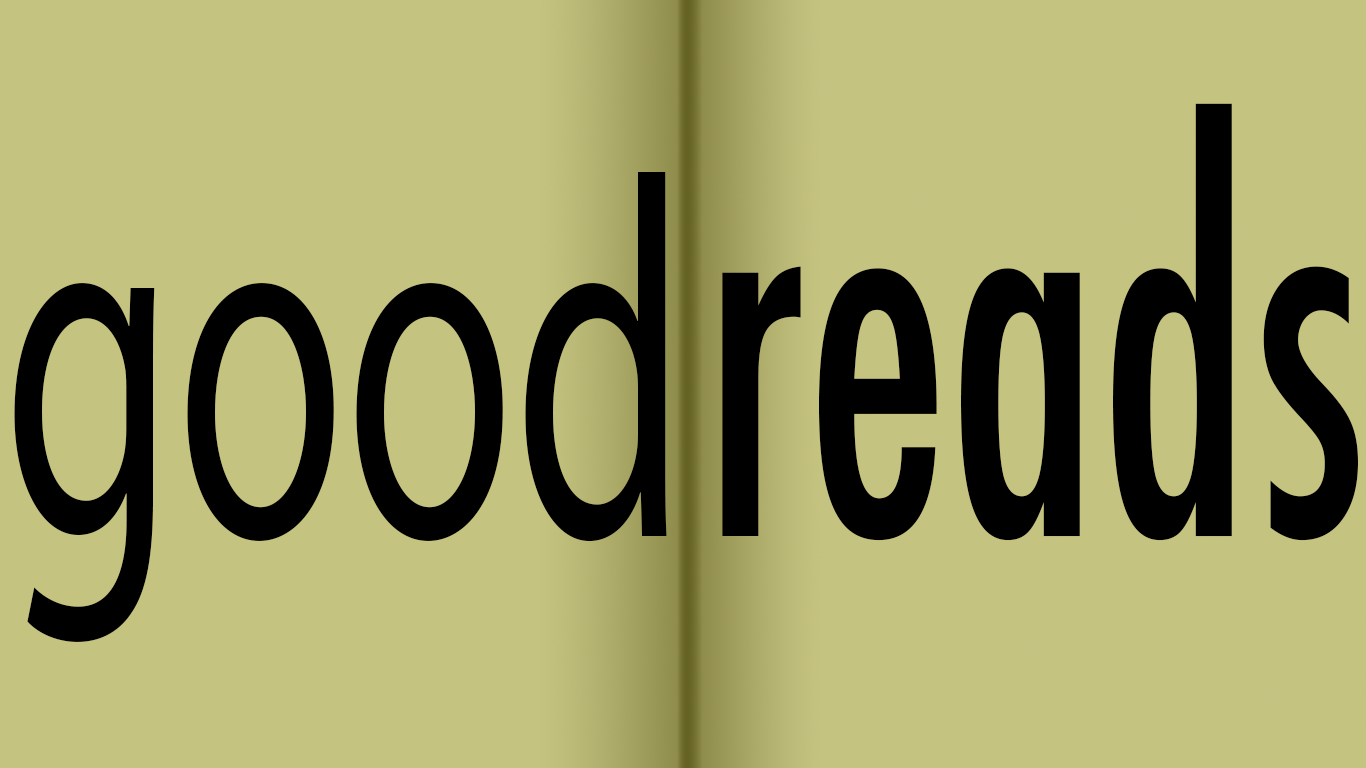
<style>
.page{position:relative;width:1366px;height:768px;background:#c5c380}
.page>*{position:absolute;margin:0}
.t1{font:520.8px "Futura-CondensedMedium";color:#000000;scale:0.74 1}
.t2{font:512.5px "MyriadPro-Regular";color:#000000;scale:0.6 1}
</style>
<div class="page">
<p class="t1" style="left:722px;top:103px;width:636px;height:438px">reads</p>
<p class="t2" style="left:14px;top:172px;width:653px;height:470px">good</p>
</div>
